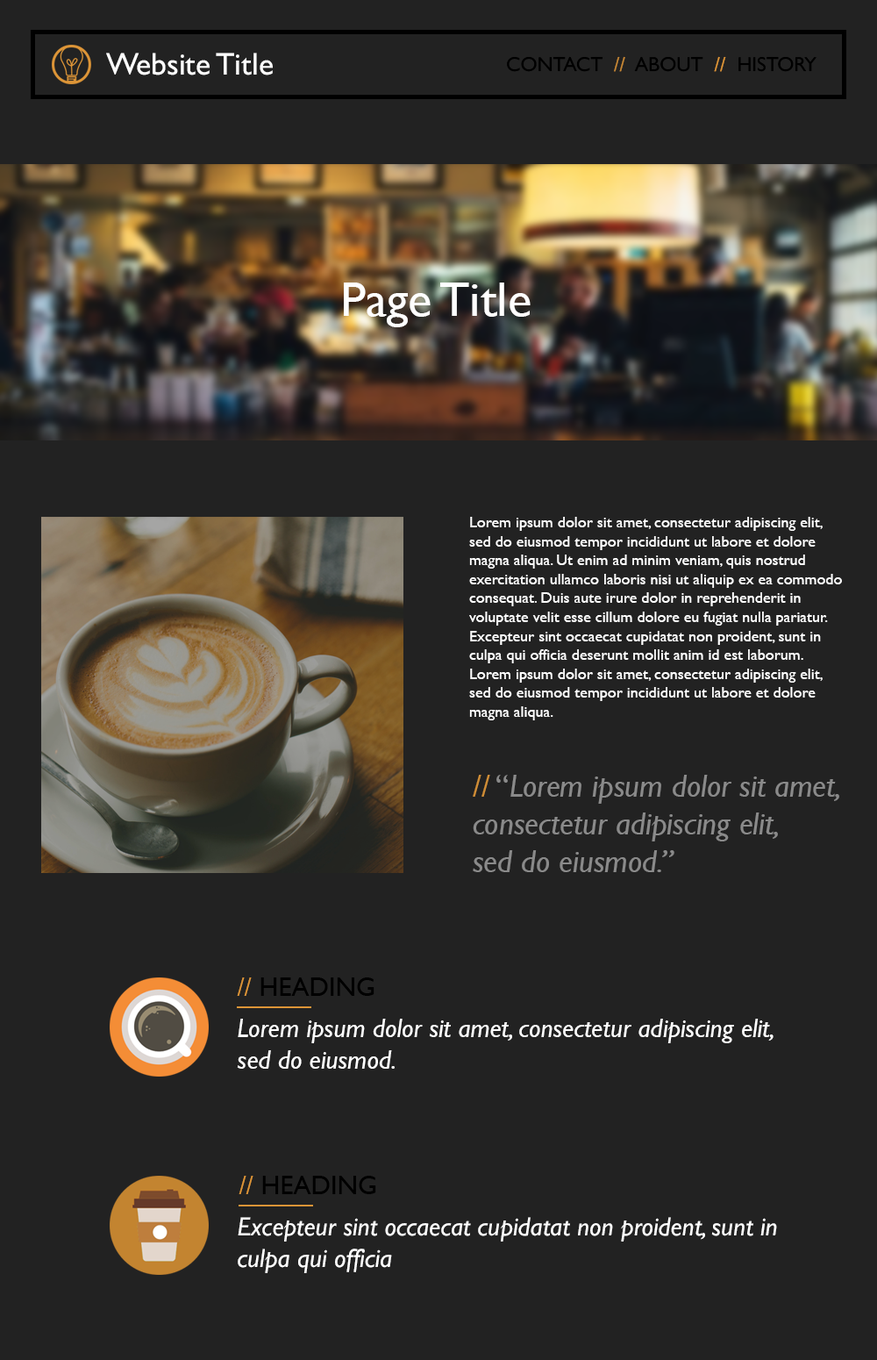
<style>
.page{position:relative;width:877px;height:1360px;background:#222222}
.page>*{position:absolute;margin:0}
.t1{font:31.3px "GillSansMT";color:#ffffff}
.t2{font:20.3px "GillSansMT";color:#000000}
.t3{font:20.3px "GillSansMT";color:#c68734}
.t4{font:20.3px "GillSansMT";color:#dd9537}
.t5{font:49.2px "GillSansMT";color:#ffffff}
.t6{font:15.8px "GillSansMT";color:#ffffff}
.t7{font:31.6px "GillSansMT-Italic";color:#8a8a8a}
.t8{font:31.6px "GillSansMT";color:#cf8d36}
.t9{font:31.6px "GillSansMT";color:#8a8a8a}
.t10{font:26.3px "GillSansMT";color:#000000}
.t11{font:26.3px "GillSansMT";color:#dd9537}
.t12{font:26.3px "GillSansMT-Italic";color:#ffffff}
</style>
<div class="page">
<p class="t1" style="left:106px;top:53px;width:167px;height:22px">Website Title</p>
<p class="t2" style="left:507px;top:56px;width:310px;height:16px">CONTACT  <span class="t3">//</span>  ABOUT  <span class="t4">//</span>  HISTORY</p>
<p class="t5" style="left:344px;top:282px;width:187px;height:45px">Page Title</p>
<p class="t6" style="left:469px;top:517px;width:373px;height:203px">Lorem ipsum dolor sit amet, consectetur adipiscing elit, <br>sed do eiusmod tempor incididunt ut labore et dolore <br>magna aliqua. Ut enim ad minim veniam, quis nostrud <br>exercitation ullamco laboris nisi ut aliquip ex ea commodo <br>consequat. Duis aute irure dolor in reprehenderit in <br>voluptate velit esse cillum dolore eu fugiat nulla pariatur. <br>Excepteur sint occaecat cupidatat non proident, sunt in <br>culpa qui officia deserunt mollit anim id est laborum.<br>Lorem ipsum dolor sit amet, consectetur adipiscing elit, <br>sed do eiusmod tempor incididunt ut labore et dolore <br>magna aliqua.</p>
<p class="t7" style="left:473px;top:774px;width:366px;height:98px"><span class="t8">// </span><span class="t9">“</span>Lorem ipsum dolor sit amet, <br>consectetur adipiscing elit, <br>sed do eiusmod.”</p>
<p class="t10" style="left:237px;top:977px;width:138px;height:19px"><span class="t11">// </span>HEADING</p>
<p class="t12" style="left:237px;top:1018px;width:537px;height:50px">Lorem ipsum dolor sit amet, consectetur adipiscing elit, <br>sed do eiusmod.</p>
<p class="t10" style="left:239px;top:1175px;width:137px;height:19px"><span class="t11">// </span>HEADING</p>
<p class="t12" style="left:238px;top:1217px;width:539px;height:56px">Excepteur sint occaecat cupidatat non proident, sunt in <br>culpa qui officia</p>
</div>
